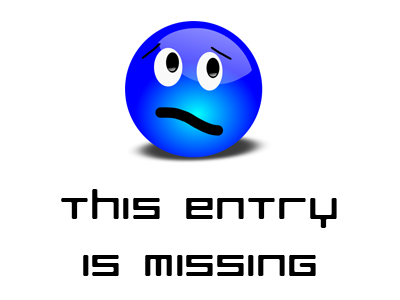
<style>
.page{position:relative;width:400px;height:300px;background:#ffffff}
.page>*{position:absolute;margin:0}
.t1{font:38.4px "RazerRegular";color:#000000;scale:1.25 1}
</style>
<div class="page">
<p class="t1" style="left:61px;top:189px;width:276px;height:87px;text-align:center">this entry<br>is missing</p>
</div>
